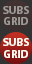
<style>
.page{position:relative;width:32px;height:64px}
.page>*{position:absolute;margin:0}
.t1{font:11.2px/11.2px "MyriadPro-Bold";color:#9e9b96}
.t2{font:11.2px/11.2px "MyriadPro-Bold";color:#fdfdf4}
</style>
<div class="page">
<p class="t1" style="left:3px;top:6px;width:26px;height:19px;text-align:center">SUBS<br>GRID</p>
<p class="t2" style="left:3px;top:38px;width:26px;height:20px;text-align:center">SUBS<br>GRID</p>
</div>
